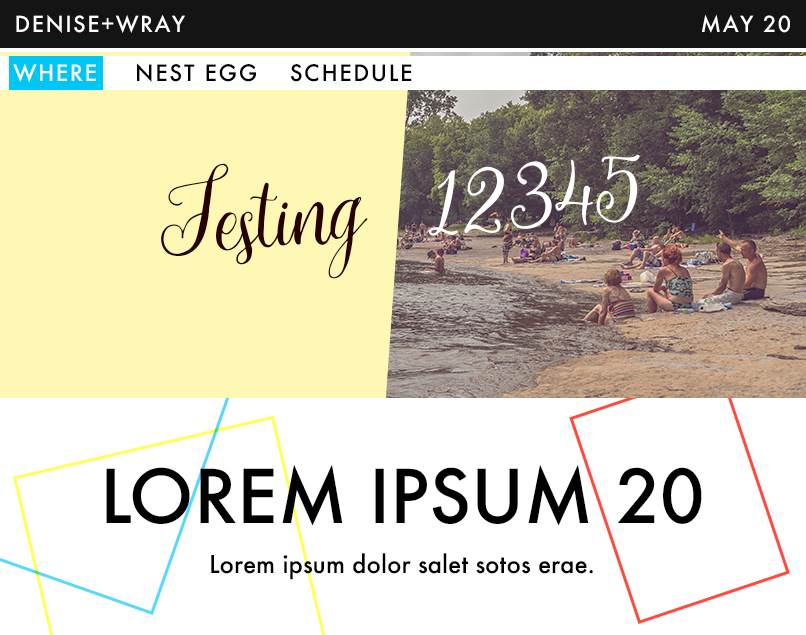
<style>
.page{position:relative;width:806px;height:635px;background:#ffffff}
.page>*{position:absolute;margin:0}
.t1{font:21.4px "Futura-Medium";letter-spacing:0.075em;color:#ffffff;text-transform:uppercase}
.t2{font:21.9px "Futura-Medium";letter-spacing:0.075em;color:#ffffff;text-transform:uppercase}
.t3{font:21.9px "Futura-Medium";letter-spacing:0.075em;color:#000000;text-transform:uppercase}
.t4{font:72px "Futura-Medium";color:#000000;text-transform:uppercase}
.t5{font:24px "Futura-Medium";color:#000000}
</style>
<div class="page">
<p class="t1" style="left:16px;top:14px;width:169px;height:19px">Denise+Wray</p>
<p class="t1" style="left:702px;top:14px;width:88px;height:19px">may 20</p>
<p class="t2" style="left:13px;top:63px;width:83px;height:19px">where</p>
<p class="t3" style="left:137px;top:63px;width:119px;height:19px">nest egg</p>
<p class="t3" style="left:291px;top:64px;width:121px;height:18px">Schedule</p>
<p class="t4" style="left:106px;top:464px;width:596px;height:62px">lorem ipsum 20</p>
<p class="t5" style="left:211px;top:553px;width:382px;height:27px">Lorem ipsum dolor salet sotos erae.</p>
</div>
